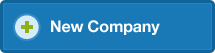
<style>
.page{position:relative;width:215px;height:53px;background:#1979b7}
.page>*{position:absolute;margin:0}
.t1{font:16px "HelveticaNeue-Bold";letter-spacing:-0.01em;color:#ffffff}
</style>
<div class="page">
<p class="t1" style="left:51px;top:20px;width:109px;height:15px">New Company</p>
</div>
